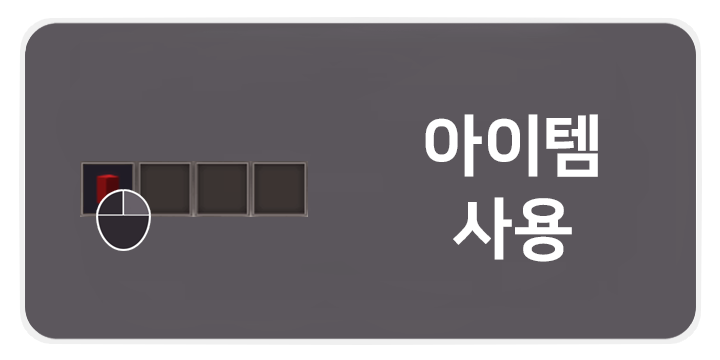
<style>
.page{position:relative;width:720px;height:360px;background:#5b565c}
.page>*{position:absolute;margin:0}
.t1{font:66.7px/83.3px "NanumSquareEB";color:#ffffff}
</style>
<div class="page">
<p class="t1" style="left:425px;top:114px;width:173px;height:148px;text-align:center">아이템<br>사용</p>
</div>
